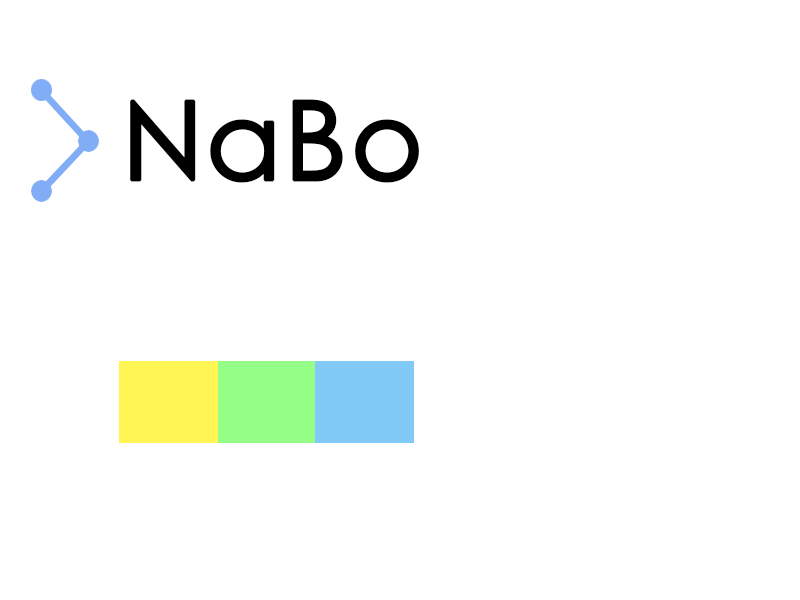
<style>
.page{position:relative;width:800px;height:600px;background:#ffffff}
.page>*{position:absolute;margin:0}
.t1{font:110px "CenturyGothic";color:#000000;font-weight:bold}
</style>
<div class="page">
<p class="t1" style="left:130px;top:99px;width:289px;height:84px">NaBo</p>
</div>
